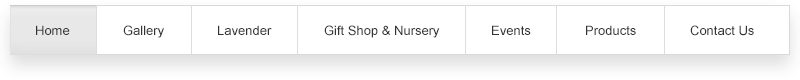
<style>
.page{position:relative;width:800px;height:80px;background:#ffffff}
.page>*{position:absolute;margin:0}
.t1{font:13px "ArialMT";color:#333333}
</style>
<div class="page">
<p class="t1" style="left:36px;top:25px;width:34px;height:10px">Home</p>
<p class="t1" style="left:123px;top:25px;width:41px;height:13px">Gallery</p>
<p class="t1" style="left:218px;top:25px;width:54px;height:10px">Lavender</p>
<p class="t1" style="left:324px;top:25px;width:116px;height:13px">Gift Shop &amp; Nursery</p>
<p class="t1" style="left:492px;top:25px;width:39px;height:10px">Events</p>
<p class="t1" style="left:586px;top:25px;width:50px;height:10px">Products</p>
<p class="t1" style="left:690px;top:25px;width:64px;height:11px">Contact Us</p>
</div>
